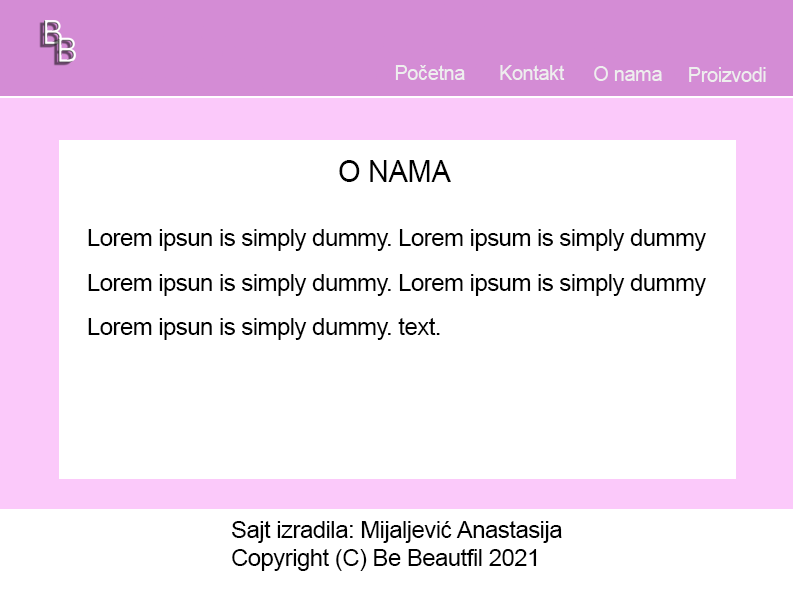
<style>
.page{position:relative;width:793px;height:593px;background:#ffffff}
.page>*{position:absolute;margin:0}
.t1{font:20px "ArialMT";letter-spacing:-0.02em;color:#eeeeee}
.t2{font:20.3px "ArialMT";letter-spacing:-0.02em;color:#eeeeee}
.t3{font:29.6px "ArialMT";letter-spacing:-0.02em;color:#000000}
.t4{font:22.7px/44.1px "ArialMT";letter-spacing:-0.02em;color:#000000;scale:1.05 1}
.t5{font:22.7px/28.1px "ArialMT";letter-spacing:-0.02em;color:#000000;scale:1.05 1}
</style>
<div class="page">
<p class="t1" style="left:395px;top:65px;width:70px;height:15px">Početna</p>
<p class="t2" style="left:500px;top:65px;width:65px;height:15px">Kontakt</p>
<p class="t1" style="left:594px;top:66px;width:68px;height:15px">O nama</p>
<p class="t1" style="left:689px;top:67px;width:77px;height:15px">Proizvodi</p>
<p class="t3" style="left:339px;top:160px;width:112px;height:22px">O NAMA</p>
<p class="t4" style="left:88px;top:229px;width:618px;height:111px">Lorem ipsun is simply dummy. Lorem ipsum is simply dummy<br>Lorem ipsun is simply dummy. Lorem ipsum is simply dummy<br>Lorem ipsun is simply dummy. text.</p>
<p class="t5" style="left:232px;top:521px;width:330px;height:50px">Sajt izradila: Mijaljević Anastasija<br>Copyright (C) Be Beautfil 2021</p>
</div>
